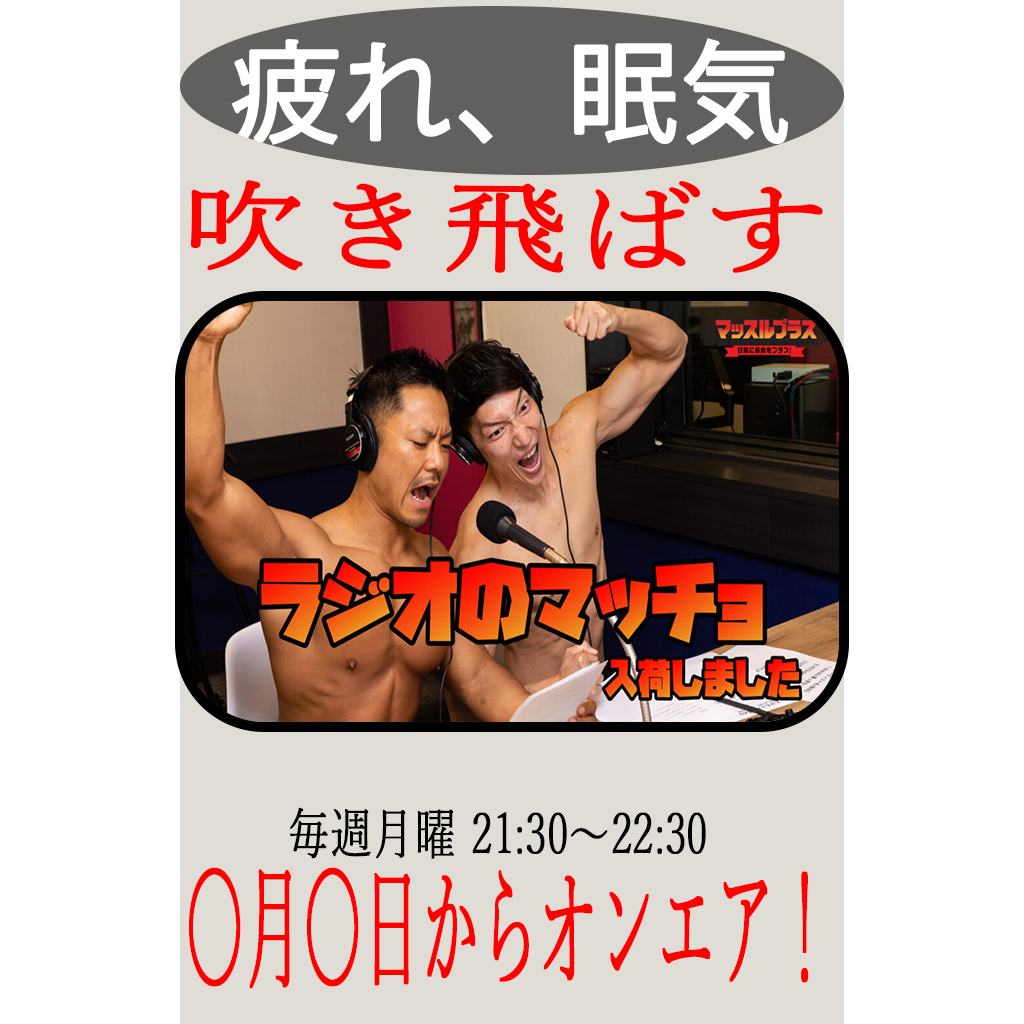
<style>
.page{position:relative;width:1024px;height:1024px;background:#ffffff}
.page>*{position:absolute;margin:0}
.t1{font:109.6px "KozGoPr6N-Regular";color:#ffffff;font-weight:bold}
.t2{font:100.5px "YuMincho-Light";color:#ff0000;font-weight:bold;scale:1.27 1}
.t3{font:55.7px "YuMincho-Light";color:#000000;font-weight:bold;scale:0.74 1}
.t4{font:136.2px "YuMincho-Light";color:#ff0000;font-weight:bold;scale:0.42 1}
</style>
<div class="page">
<p class="t1" style="left:231px;top:38px;width:557px;height:108px">疲れ、眠気</p>
<p class="t2" style="left:190px;top:179px;width:633px;height:94px">吹き飛ばす</p>
<p class="t3" style="left:290px;top:807px;width:416px;height:52px">毎週月曜 21:30～22:30</p>
<p class="t4" style="left:189px;top:867px;width:620px;height:122px">〇月〇日からオンエア！</p>
</div>
